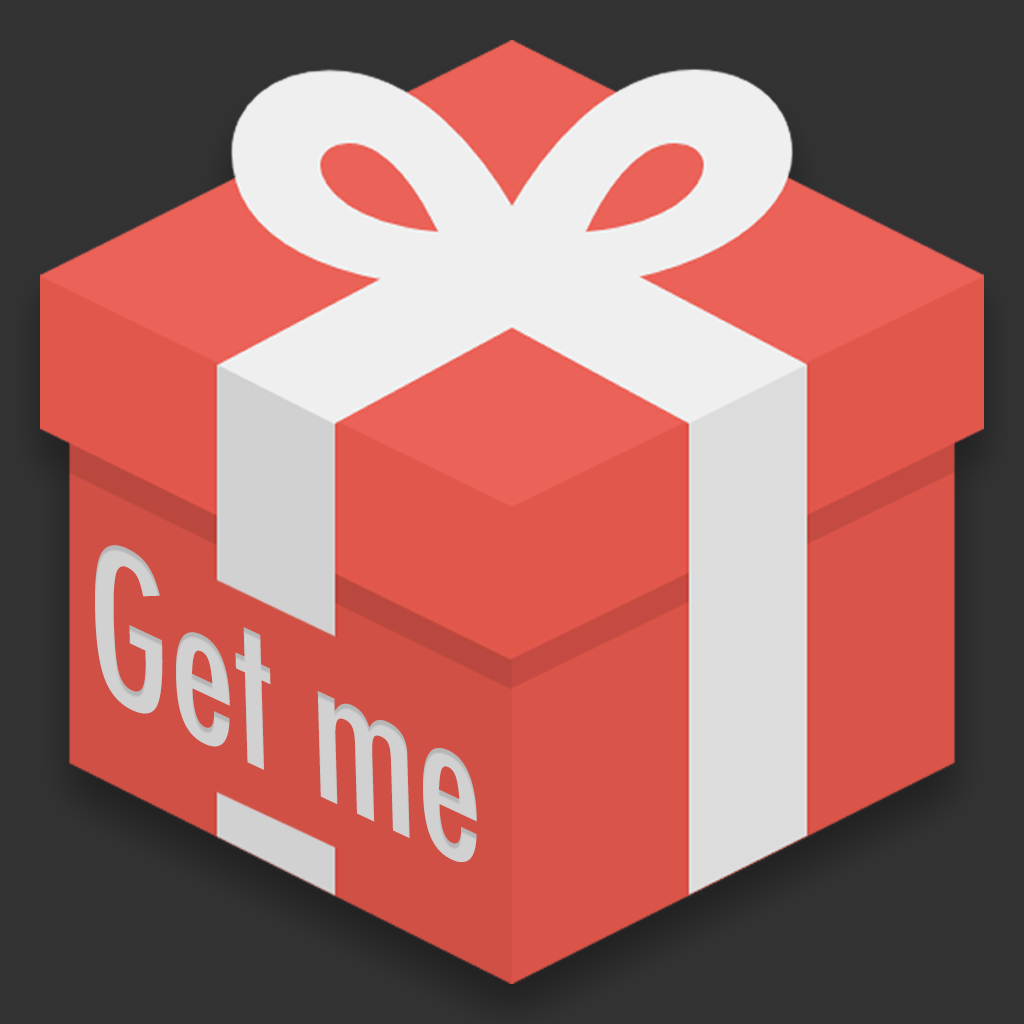
<style>
.page{position:relative;width:1024px;height:1024px;background:#333333}
.page>*{position:absolute;margin:0}
.t1{font:208.3px "Futura-CondensedMedium";color:#d1d1d1;scale:0.93 1}
</style>
<div class="page">
<p class="t1" style="left:95px;top:545px;width:382px;height:317px;rotate:25deg">Get me</p>
</div>
